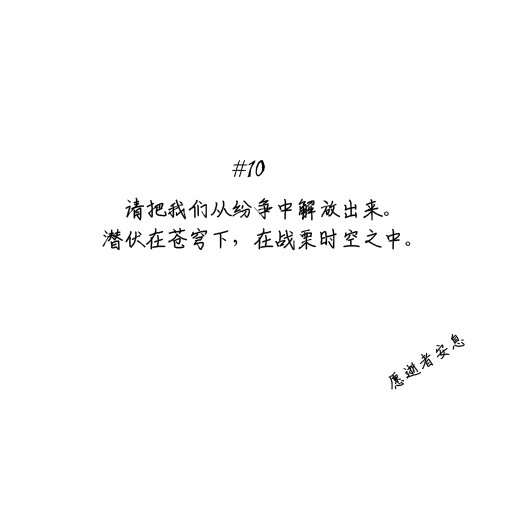
<style>
.page{position:relative;width:512px;height:512px;background:#ffffff}
.page>*{position:absolute;margin:0}
.t1{font:24px/30px "ShouShuti";letter-spacing:-0.1em;color:#000000}
.t2{font:17.9px "ShouShuti";color:#000000}
</style>
<div class="page">
<p class="t1" style="left:102px;top:197px;width:309px;height:54px;text-align:center">请把我们从纷争中解放出来。<br>潜伏在苍穹下，在战栗时空之中。</p>
<p class="t2" style="left:388px;top:334px;width:77px;height:56px;rotate:-33deg">愿逝者安息</p>
</div>
